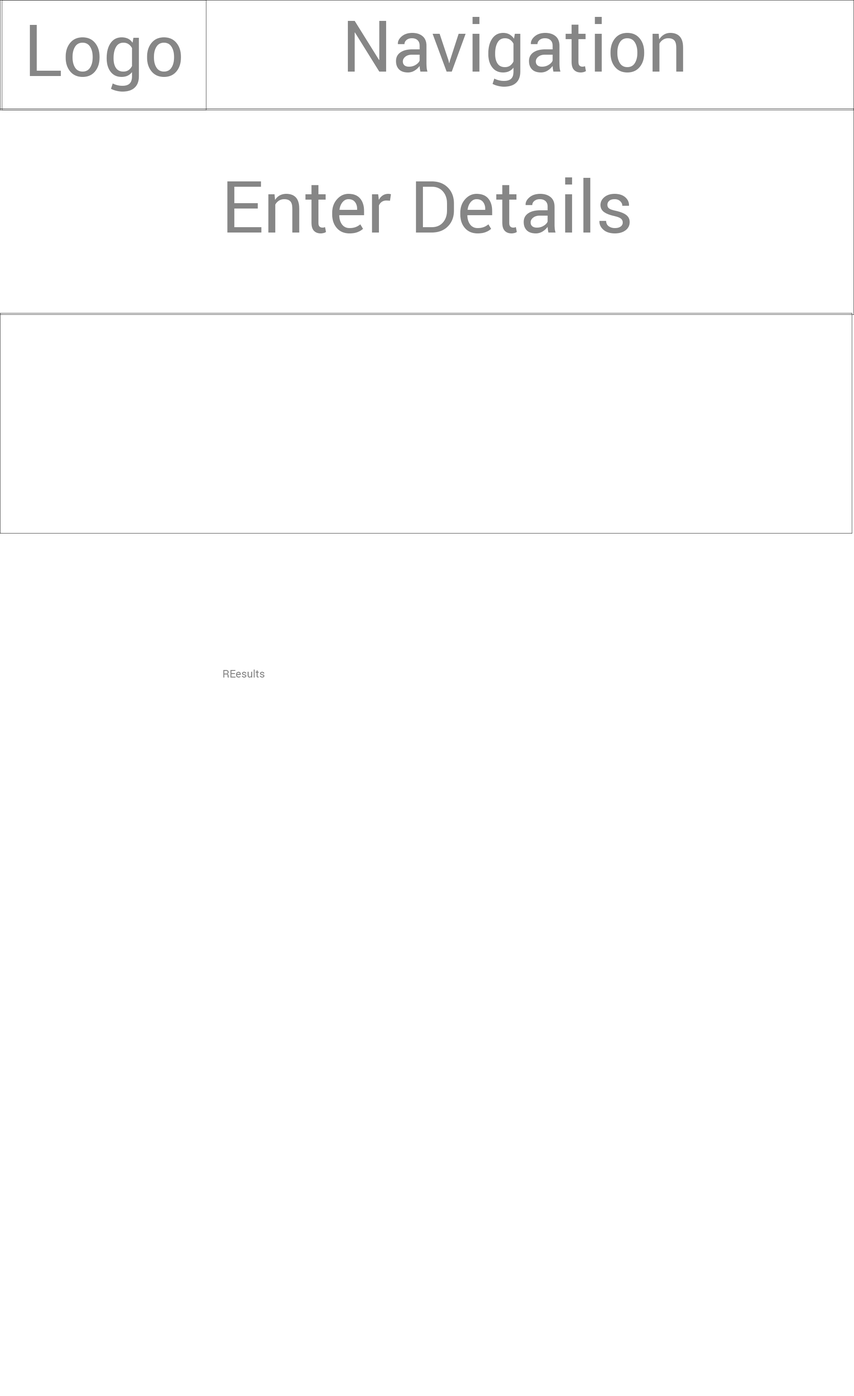
<style>
.page{position:relative;width:854px;height:1396px;background:#ffffff}
.page>*{position:absolute;margin:0}
.t1{font:71.5px "Roboto-Regular";color:#868686}
.t2{font:71.9px "Roboto-Regular";color:#868686}
.t3{font:10.7px "Roboto-Regular";color:#868686}
</style>
<div class="page">
<p class="t1" style="left:348px;top:17px;width:335px;height:70px">Navigation</p>
<p class="t2" style="left:30px;top:25px;width:151px;height:67px">Logo</p>
<p class="t2" style="left:227px;top:177px;width:403px;height:56px">Enter Details</p>
<p class="t3" style="left:223px;top:670px;width:42px;height:8px">REesults</p>
</div>
